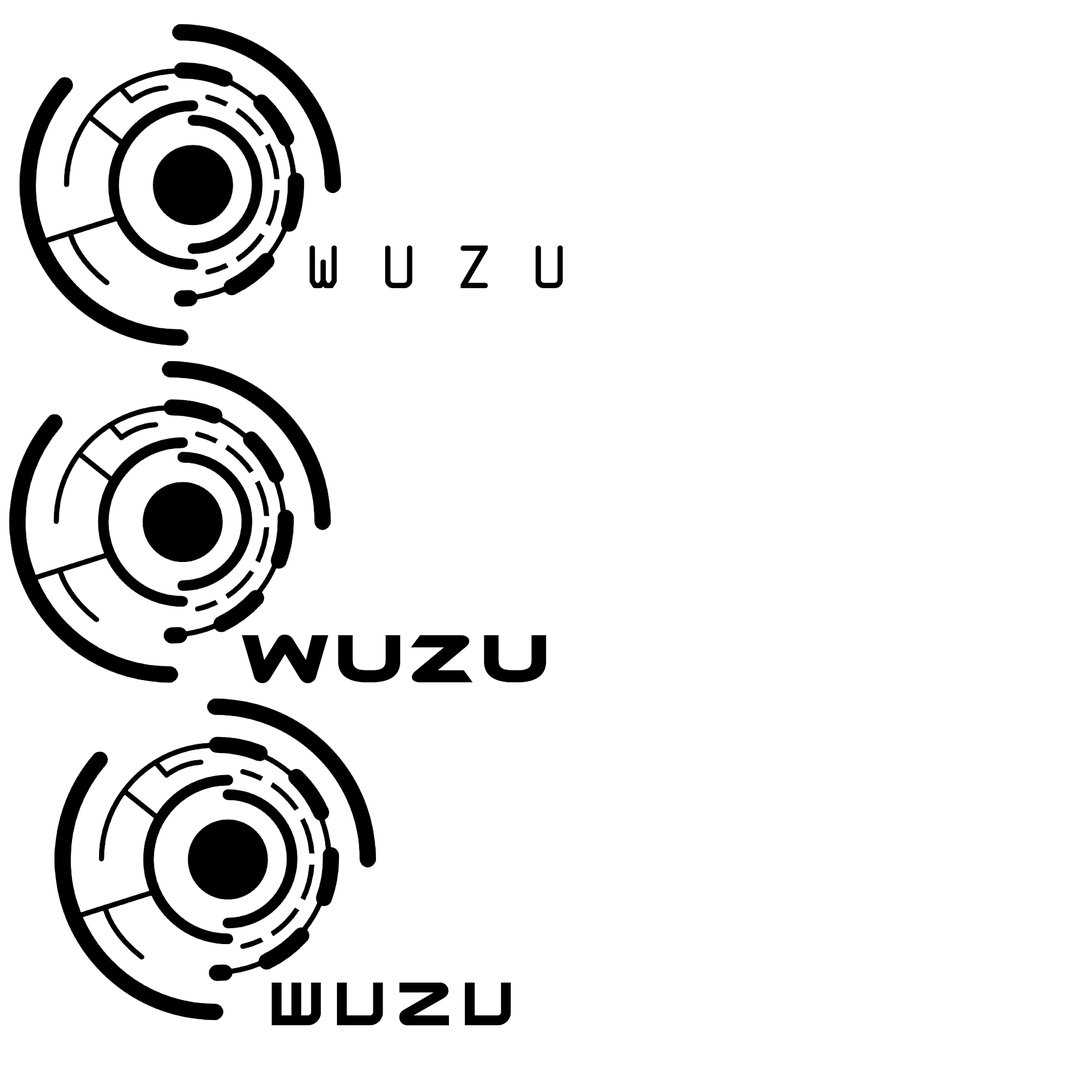
<style>
.page{position:relative;width:1092px;height:1092px;background:#ffffff}
.page>*{position:absolute;margin:0}
.t1{font:65.6px "OCRAExtended";letter-spacing:0.545em;color:#000000;text-transform:uppercase}
.t2{font:65.6px "Ethnocentric";letter-spacing:0.1em;color:#000000;text-transform:uppercase}
.t3{font:65.6px "TerminatorTwo";letter-spacing:0.2em;color:#000000;text-transform:uppercase}
</style>
<div class="page">
<p class="t1" style="left:309px;top:246px;width:254px;height:42px">wuzu</p>
<p class="t2" style="left:242px;top:634px;width:305px;height:49px">wuzu</p>
<p class="t3" style="left:272px;top:983px;width:239px;height:43px">wuzu</p>
</div>
